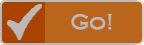
<style>
.page{position:relative;width:144px;height:45px;background:#ba651c}
.page>*{position:absolute;margin:0}
.t1{font:21.6px "CopperplateGothic-Light";color:#bababa;font-weight:bold}
</style>
<div class="page">
<p class="t1" style="left:71px;top:14px;width:41px;height:16px">Go!</p>
</div>
